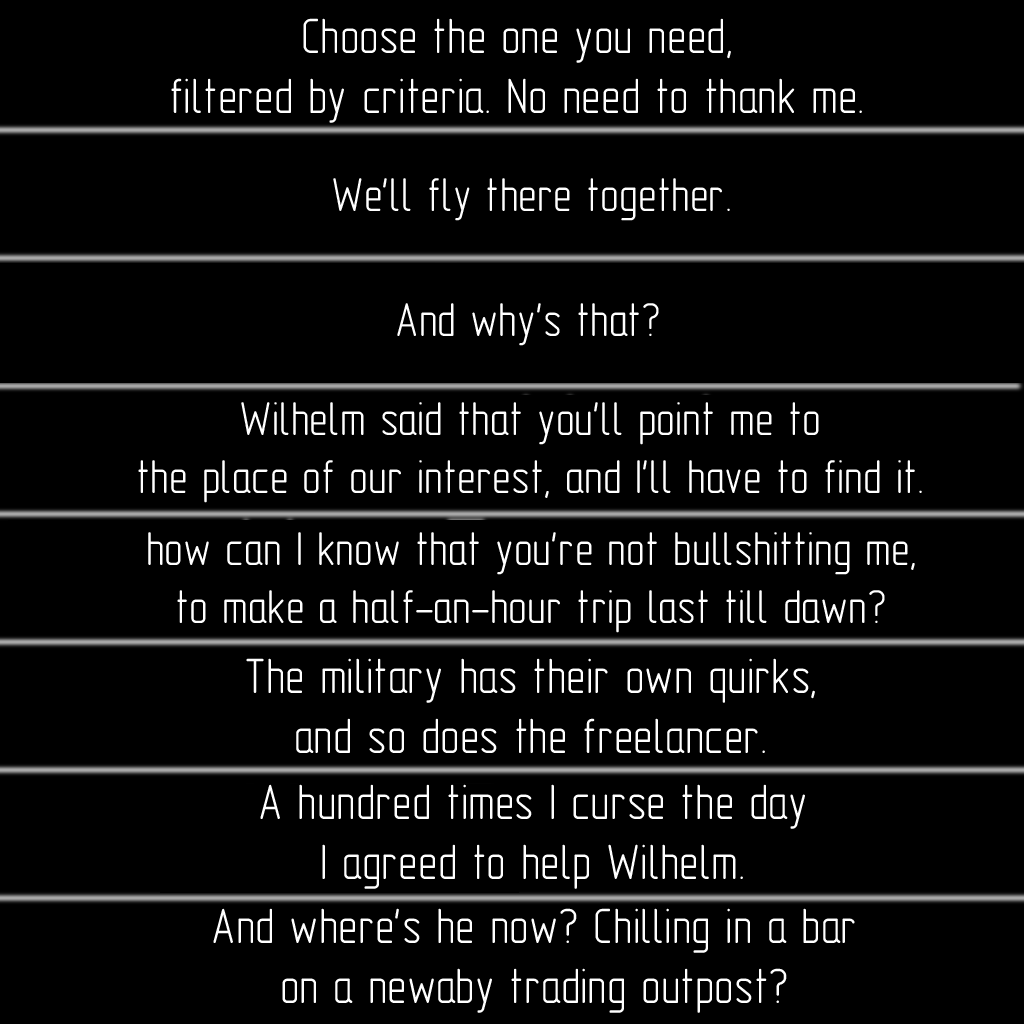
<style>
.page{position:relative;width:1024px;height:1024px;background:#000000}
.page>*{position:absolute;margin:0}
.t1{font:50px "GOST-2.304-81typeA";color:#ffffff}
.t2{font:48px "GOST-2.304-81typeA";color:#ffffff}
</style>
<div class="page">
<p class="t1" style="left:171px;top:18px;width:691px;height:105px;text-align:center">Choose the one you need,<br>filtered by criteria. No need to thank me.</p>
<p class="t2" style="left:333px;top:178px;width:397px;height:43px">We'll fly there together.</p>
<p class="t2" style="left:397px;top:303px;width:262px;height:43px">And why's that?</p>
<p class="t2" style="left:138px;top:402px;width:784px;height:101px;text-align:center">Wilhelm said that you'll point me to<br>the place of our interest, and I'll have to find it.</p>
<p class="t2" style="left:148px;top:532px;width:767px;height:101px;text-align:center">how can I know that you're not bullshitting me,<br>to make a half-an-hour trip last till dawn?</p>
<p class="t1" style="left:246px;top:658px;width:569px;height:95px;text-align:center">The military has their own quirks,<br>and so does the freelancer.</p>
<p class="t1" style="left:260px;top:784px;width:545px;height:105px;text-align:center">A hundred times I curse the day<br>I agreed to help Wilhelm.</p>
<p class="t1" style="left:213px;top:908px;width:642px;height:105px;text-align:center">And where's he now? Chilling in a bar<br>on a newaby trading outpost?</p>
</div>
